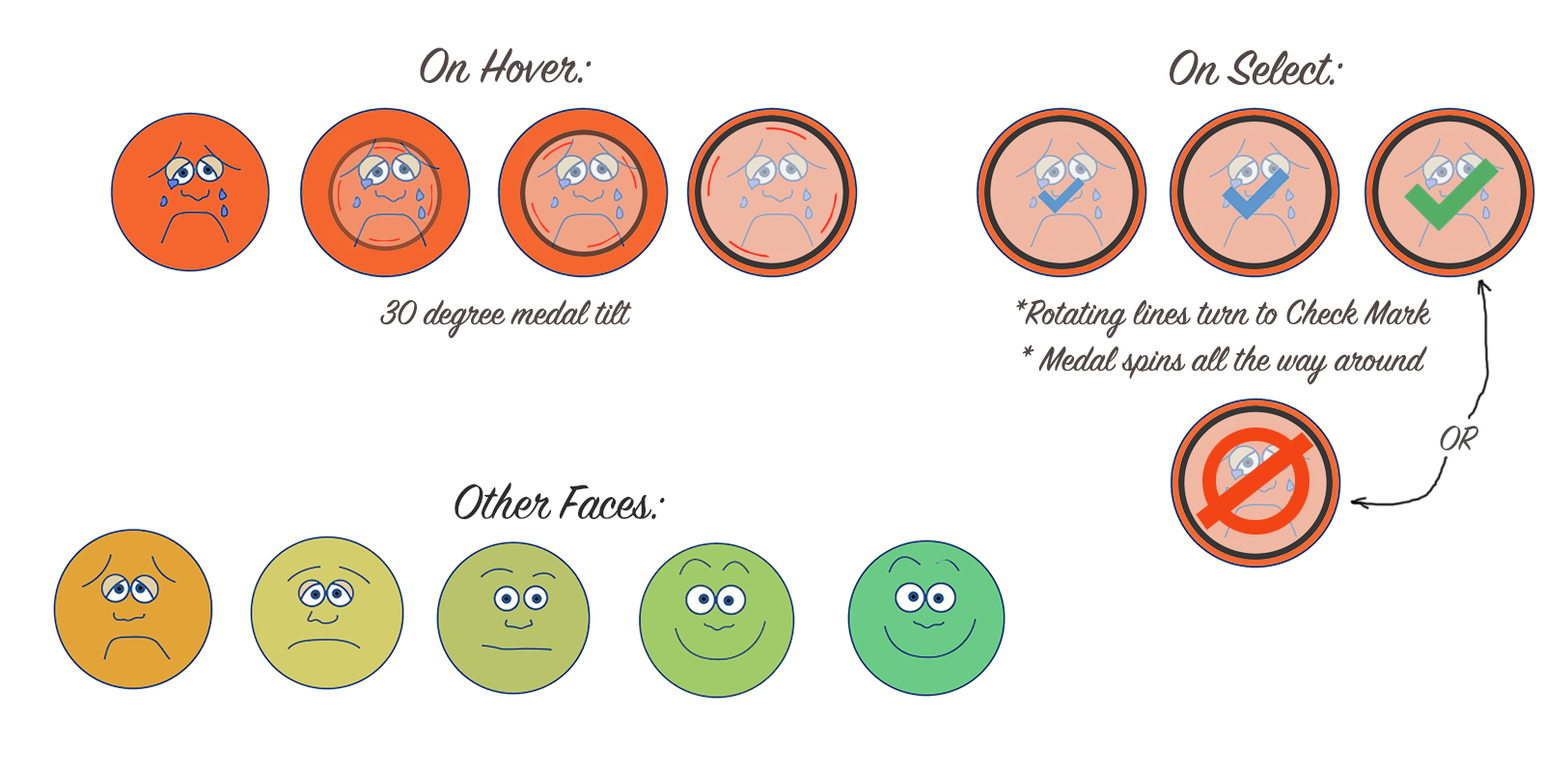
<style>
.page{position:relative;width:1544px;height:772px;background:#ffffff}
.page>*{position:absolute;margin:0}
.t1{font:54.1px "SignPainter-HouseScript";color:#514746}
.t2{font:38.6px "SignPainter-HouseScript";color:#514746}
.t3{font:38.6px "SignPainter-HouseScript";color:#4d4d4c}
.t4{font:54.1px "SignPainter-HouseScript";color:#2b2b2b}
</style>
<div class="page">
<p class="t1" style="left:420px;top:47px;width:172px;height:36px">On Hover:</p>
<p class="t1" style="left:1170px;top:49px;width:174px;height:36px">On Select:</p>
<p class="t2" style="left:380px;top:299px;width:252px;height:40px">30 degree medal tilt</p>
<p class="t2" style="left:1016px;top:298px;width:415px;height:87px;text-align:center">*Rotating lines turn to Check Mark<br>* Medal spins all the way around</p>
<p class="t3" style="left:1440px;top:426px;width:39px;height:25px">OR</p>
<p class="t4" style="left:455px;top:483px;width:210px;height:36px">Other Faces:</p>
</div>
